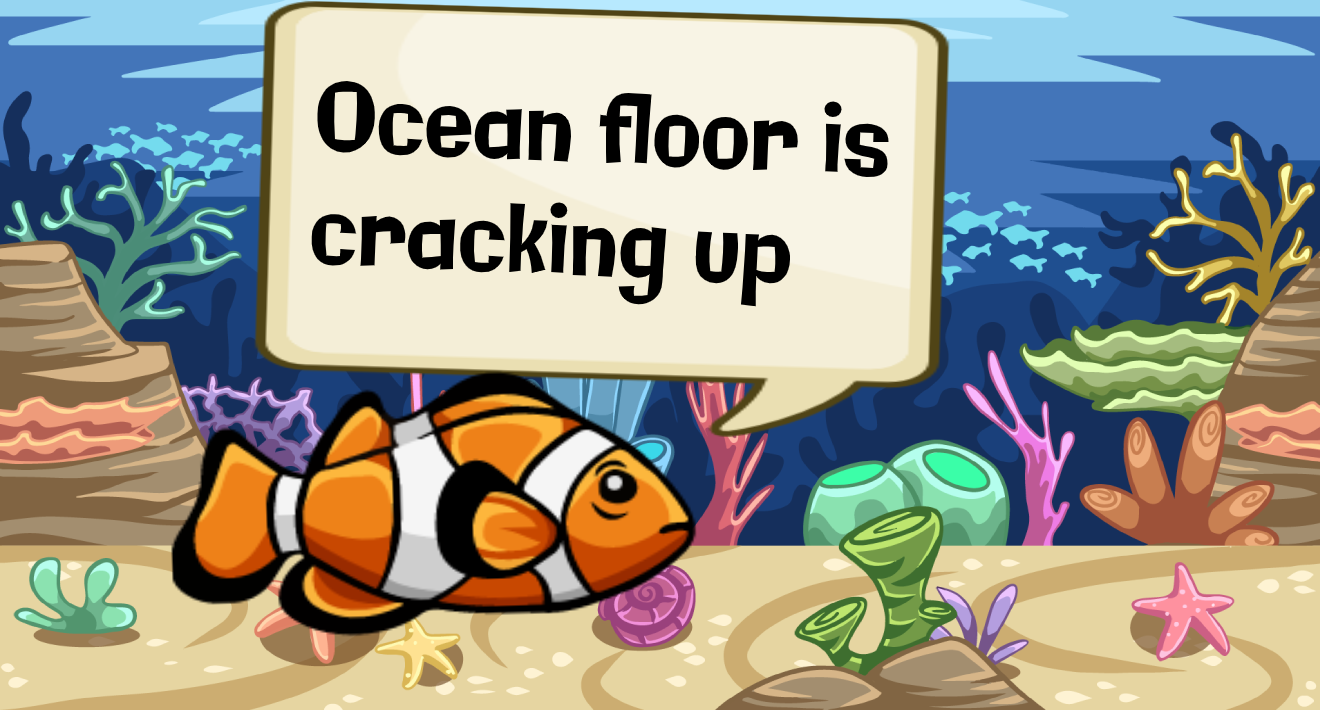
<style>
.page{position:relative;width:1320px;height:710px}
.page>*{position:absolute;margin:0}
.t1{font:94.3px "Galindo-Regular";color:#000000;scale:0.85 1}
</style>
<div class="page">
<p class="t1" style="left:311px;top:81px;width:578px;height:226px;rotate:3deg">Ocean floor is <br>cracking up</p>
</div>
